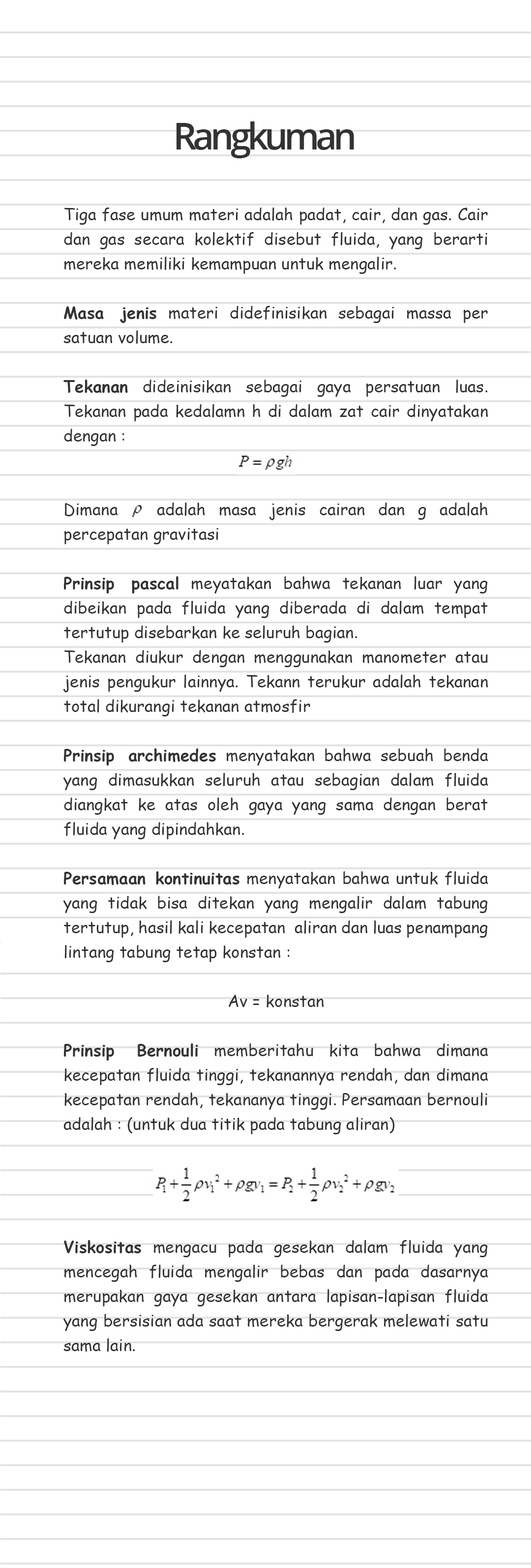
<style>
.page{position:relative;width:531px;height:1568px;background:#ffffff}
.page>*{position:absolute;margin:0}
.t1{font:36.9px "OpenSans-SemiBold";letter-spacing:-0.1em;color:#333333}
.t2{font:16.4px/24.6px "ComicSansMS";color:#333333}
.t3{font:16.4px/24.6px "ComicSansMS-Bold";color:#333333}
</style>
<div class="page">
<p class="t1" style="left:177px;top:121px;width:177px;height:37px">Rangkuman</p>
<p class="t2" style="left:63px;top:207px;width:425px;height:1145px;text-align:justify">Tiga fase umum materi adalah padat, cair, dan gas. Cair dan gas secara kolektif disebut fluida, yang berarti mereka memiliki kemampuan untuk mengalir. <br><br><span class="t3">Masa jenis</span> materi didefinisikan sebagai massa per satuan volume. <br><span class="t3"><br>Tekanan</span> dideinisikan sebagai gaya persatuan luas. Tekanan pada kedalamn h di dalam zat cair dinyatakan dengan :  <br> <br><br>Dimana   adalah masa jenis cairan dan g adalah percepatan gravitasi<br><br><span class="t3">Prinsip pascal</span> meyatakan bahwa tekanan luar yang dibeikan pada fluida yang diberada di dalam tempat tertutup disebarkan ke seluruh bagian.<br>Tekanan diukur dengan menggunakan manometer atau jenis pengukur lainnya. Tekann terukur adalah tekanan total dikurangi tekanan atmosfir  <br><br><span class="t3">Prinsip archimedes</span> menyatakan bahwa sebuah benda yang dimasukkan seluruh atau sebagian dalam fluida diangkat ke atas oleh gaya yang sama dengan berat fluida yang dipindahkan. <br><span class="t3"><br>Persamaan kontinuitas</span> menyatakan bahwa untuk fluida yang tidak bisa ditekan yang mengalir dalam tabung tertutup, hasil kali kecepatan  aliran dan luas penampang lintang tabung tetap konstan :<br><br>Av = konstan<br><span class="t3"><br>Prinsip Bernouli</span> memberitahu kita bahwa dimana kecepatan fluida tinggi, tekanannya rendah, dan dimana kecepatan rendah, tekananya tinggi. Persamaan bernouli adalah : (untuk dua titik pada tabung aliran) <br><br><br><br><br><span class="t3">Viskositas</span> mengacu pada gesekan dalam fluida yang mencegah fluida mengalir bebas dan pada dasarnya merupakan gaya gesekan antara lapisan-lapisan fluida yang bersisian ada saat mereka bergerak melewati satu sama lain.</p>
</div>
